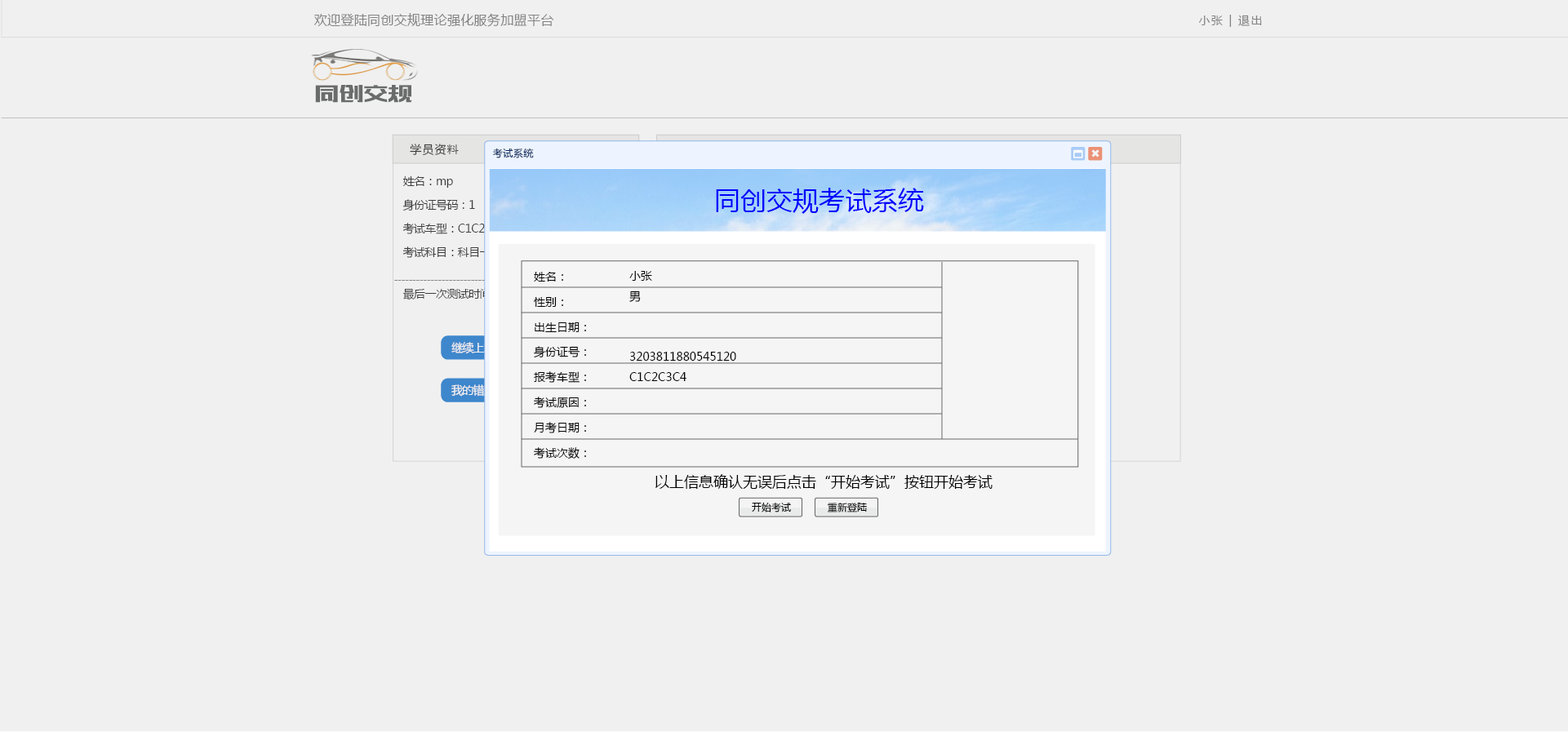
<style>
.page{position:relative;width:1568px;height:732px;background:#f0f0f0}
.page>*{position:absolute;margin:0}
.t1{font:13.1px "MicrosoftYaHei";letter-spacing:0.02em;color:#838383}
.t2{font:11.4px "MicrosoftYaHei";letter-spacing:0.12em;color:#838383}
.t3{font:23.3px "MFBanHei_Noncommercial-Regular";letter-spacing:0.055em;color:#6a6b6b;text-transform:uppercase}
.t4{font:11.4px "MicrosoftYaHei";letter-spacing:0.08em;color:#3e3e3e}
.t5{font:9.8px "MicrosoftYaHei";letter-spacing:0.04em;color:#0d2d61}
.t6{font:11.4px/23.5px "MicrosoftYaHei";letter-spacing:-0.04em;color:#3e3e3e}
.t7{font:26.3px "MicrosoftYaHei";color:#0000fc}
.t8{font:11.4px/25.1px "MicrosoftYaHei";color:#000000}
.t9{font:11.4px/20.2px "MicrosoftYaHei";color:#000000}
.t10{font:11.4px "MicrosoftYaHei";letter-spacing:-0.04em}
.t11{font:11.4px "MicrosoftYaHei";letter-spacing:-0.06em;color:#ffffff}
.t12{font:14.7px "MicrosoftYaHei";color:#000000}
.t13{font:9.8px "MicrosoftYaHei";color:#000000}
</style>
<div class="page">
<p class="t1" style="left:314px;top:13px;width:239px;height:14px">欢迎登陆同创交规理论强化服务加盟平台</p>
<p class="t2" style="left:1199px;top:15px;width:63px;height:12px">小张 | 退出</p>
<p class="t3" style="left:315px;top:85px;width:97px;height:18px">同创交规</p>
<p class="t4" style="left:410px;top:144px;width:49px;height:12px">学员资料</p>
<p class="t5" style="left:493px;top:148px;width:41px;height:10px">考试系统</p>
<p class="t6" style="left:402px;top:176px;width:110px;height:82px">姓名：mp<br>身份证号码：1<br>考试车型：C1C2C3C4<br>考试科目：科目一</p>
<p class="t7" style="left:716px;top:188px;width:208px;height:26px">同创交规考试系统</p>
<p class="t8" style="left:534px;top:272px;width:52px;height:188px">姓名：<br>性别：<br>出生日期：<br>身份证号：<br>报考车型：<br>考试原因：<br>月考日期：<br>考试次数：</p>
<p class="t9" style="left:629px;top:271px;width:107px;height:110px">小张<br>男<br><br><br>3203811880545120<br>C1C2C3C4</p>
<p class="t10" style="left:402px;top:288px;width:213px;height:12px">最后一次测试时间：2017-03-29 09:90:50.0</p>
<p class="t11" style="left:451px;top:342px;width:44px;height:12px">继续上次</p>
<p class="t11" style="left:451px;top:384px;width:44px;height:13px">我的错题</p>
<p class="t12" style="left:655px;top:474px;width:338px;height:15px">以上信息确认无误后点击“开始考试”按钮开始考试</p>
<p class="t13" style="left:752px;top:502px;width:39px;height:11px">开始考试</p>
<p class="t13" style="left:827px;top:503px;width:40px;height:10px">重新登陆</p>
</div>
